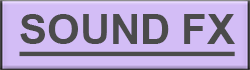
<style>
.page{position:relative;width:250px;height:70px;background:#d3bdf6}
.page>*{position:absolute;margin:0}
.t1{font:41.7px "Arial-BoldMT";color:#4b4b4b;text-decoration:underline}
</style>
<div class="page">
<p class="t1" style="left:19px;top:14px;width:216px;height:43px">SOUND FX</p>
</div>
